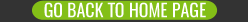
<style>
.page{position:relative;width:248px;height:22px;background:#83bf17}
.page>*{position:absolute;margin:0}
.t1{font:18px "Oswald-Regular";color:#ffffff}
</style>
<div class="page">
<p class="t1" style="left:44px;top:2px;width:162px;height:16px">GO BACK TO HOME PAGE</p>
</div>
